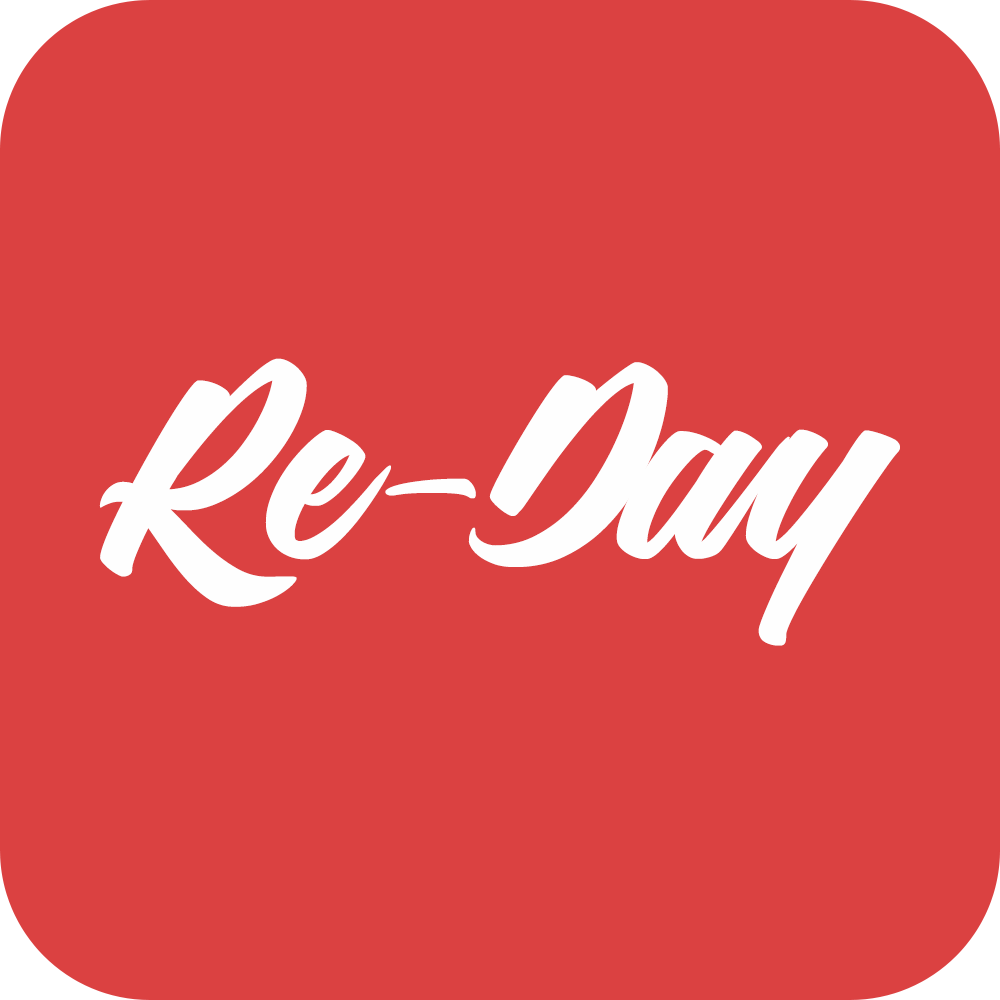
<style>
.page{position:relative;width:1000px;height:1000px;background:#db4141}
.page>*{position:absolute;margin:0}
.t1{font:250px "Thirthy-Regular";letter-spacing:0.05em;color:#fefefe}
.t2{font:250px "Thirthy-Regular";letter-spacing:0.1em;color:#fefefe}
.t3{font:250px "Julietta";letter-spacing:-0.075em;color:#fefefe}
.t4{font:250px "Thirthy-Regular";letter-spacing:-0.075em;color:#fefefe}
</style>
<div class="page">
<p class="t1" style="left:99px;top:358px;width:801px;height:288px">R<span class="t2">e</span><span class="t3">-</span><span class="t4">D</span>ay</p>
</div>
